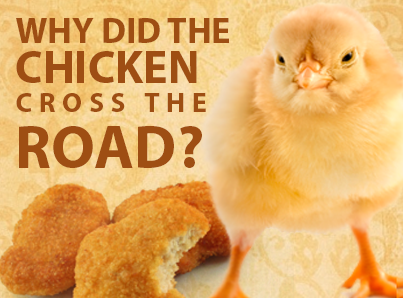
<style>
.page{position:relative;width:403px;height:298px}
.page>*{position:absolute;margin:0}
.t1{font:36px/40px "MyriadPro-Bold";color:#9e4e13;text-transform:uppercase}
.t2{font:46px/40px "MyriadPro-Bold";color:#9e4e13;text-transform:uppercase}
.t3{font:28px/29px "MyriadPro-Bold";letter-spacing:0.24em;color:#9e4e13;text-transform:uppercase}
.t4{font:61px/56px "MyriadPro-Bold";color:#9e4e13;text-transform:uppercase}
</style>
<div class="page">
<p class="t1" style="left:16px;top:18px;width:213px;height:150px">WHY DID THE <span class="t2">CHICKEN </span><span class="t3">CROSS THE </span><span class="t4">ROAD?</span></p>
</div>
